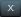
<style>
.page{position:relative;width:21px;height:17px}
.page>*{position:absolute;margin:0}
.t1{font:10.7px "PTMono-Regular";letter-spacing:0.025em;color:#bdcbce}
</style>
<div class="page">
<p class="t1" style="left:7px;top:5px;width:7px;height:6px">x</p>
</div>
